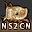
<style>
.page{position:relative;width:32px;height:32px;background:#333333}
.page>*{position:absolute;margin:0}
.t1{font:7.5px "AdobeHeitiStd-Regular";letter-spacing:0.18em}
</style>
<div class="page">
<p class="t1" style="left:2px;top:23px;width:28px;height:6px">NS2CN</p>
</div>
